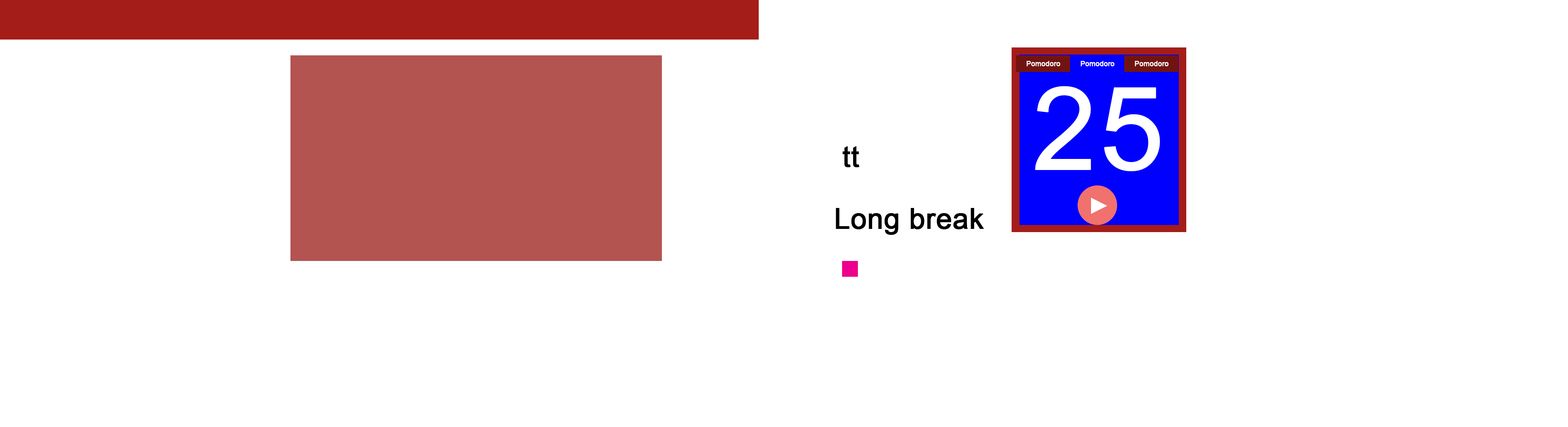
<style>
.page{position:relative;width:1568px;height:427px;background:#ffffff}
.page>*{position:absolute;margin:0}
.t1{font:7.1px "ArialMT";color:#ffffff;font-weight:bold}
.t2{font:115.9px "ArialMT";color:#ffffff;font-weight:bold}
.t3{font:28.5px "ArialMT";color:#000000;font-weight:bold}
</style>
<div class="page">
<p class="t1" style="left:1027px;top:61px;width:33px;height:5px">Pomodoro</p>
<p class="t1" style="left:1081px;top:61px;width:33px;height:5px">Pomodoro</p>
<p class="t1" style="left:1135px;top:61px;width:33px;height:5px">Pomodoro</p>
<p class="t2" style="left:1035px;top:86px;width:125px;height:85px">25</p>
<p class="t3" style="left:842px;top:146px;width:17px;height:21px">tt</p>
<p class="t3" style="left:836px;top:208px;width:148px;height:27px">Long break</p>
</div>
